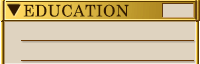
<style>
.page{position:relative;width:200px;height:64px;background:#dfd3c0}
.page>*{position:absolute;margin:0}
.t1{font:16px "CenturySchoolbook";letter-spacing:0.025em;color:#321a02}
</style>
<div class="page">
<p class="t1" style="left:23px;top:4px;width:106px;height:13px">EDUCATION</p>
</div>
